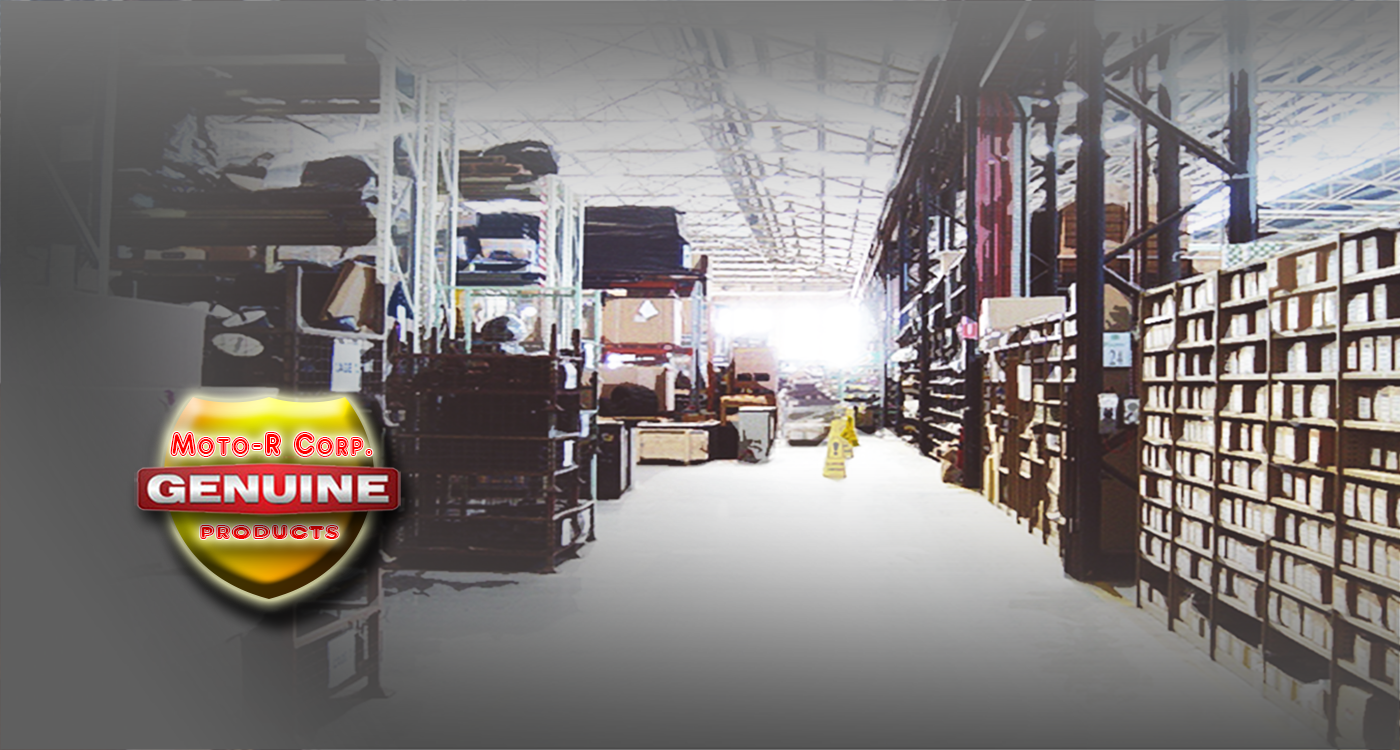
<style>
.page{position:relative;width:1400px;height:750px}
.page>*{position:absolute;margin:0}
.t1{font:36.3px "ARDELANEY";color:#ff0000;scale:0.87 1}
.t2{font:20.1px "ARDELANEY";scale:1.36 1}
</style>
<div class="page">
<p class="t1" style="left:170px;top:432px;width:203px;height:25px">Moto-R Corp.</p>
<p class="t2" style="left:200px;top:525px;width:139px;height:14px">PRODUCTS</p>
</div>
